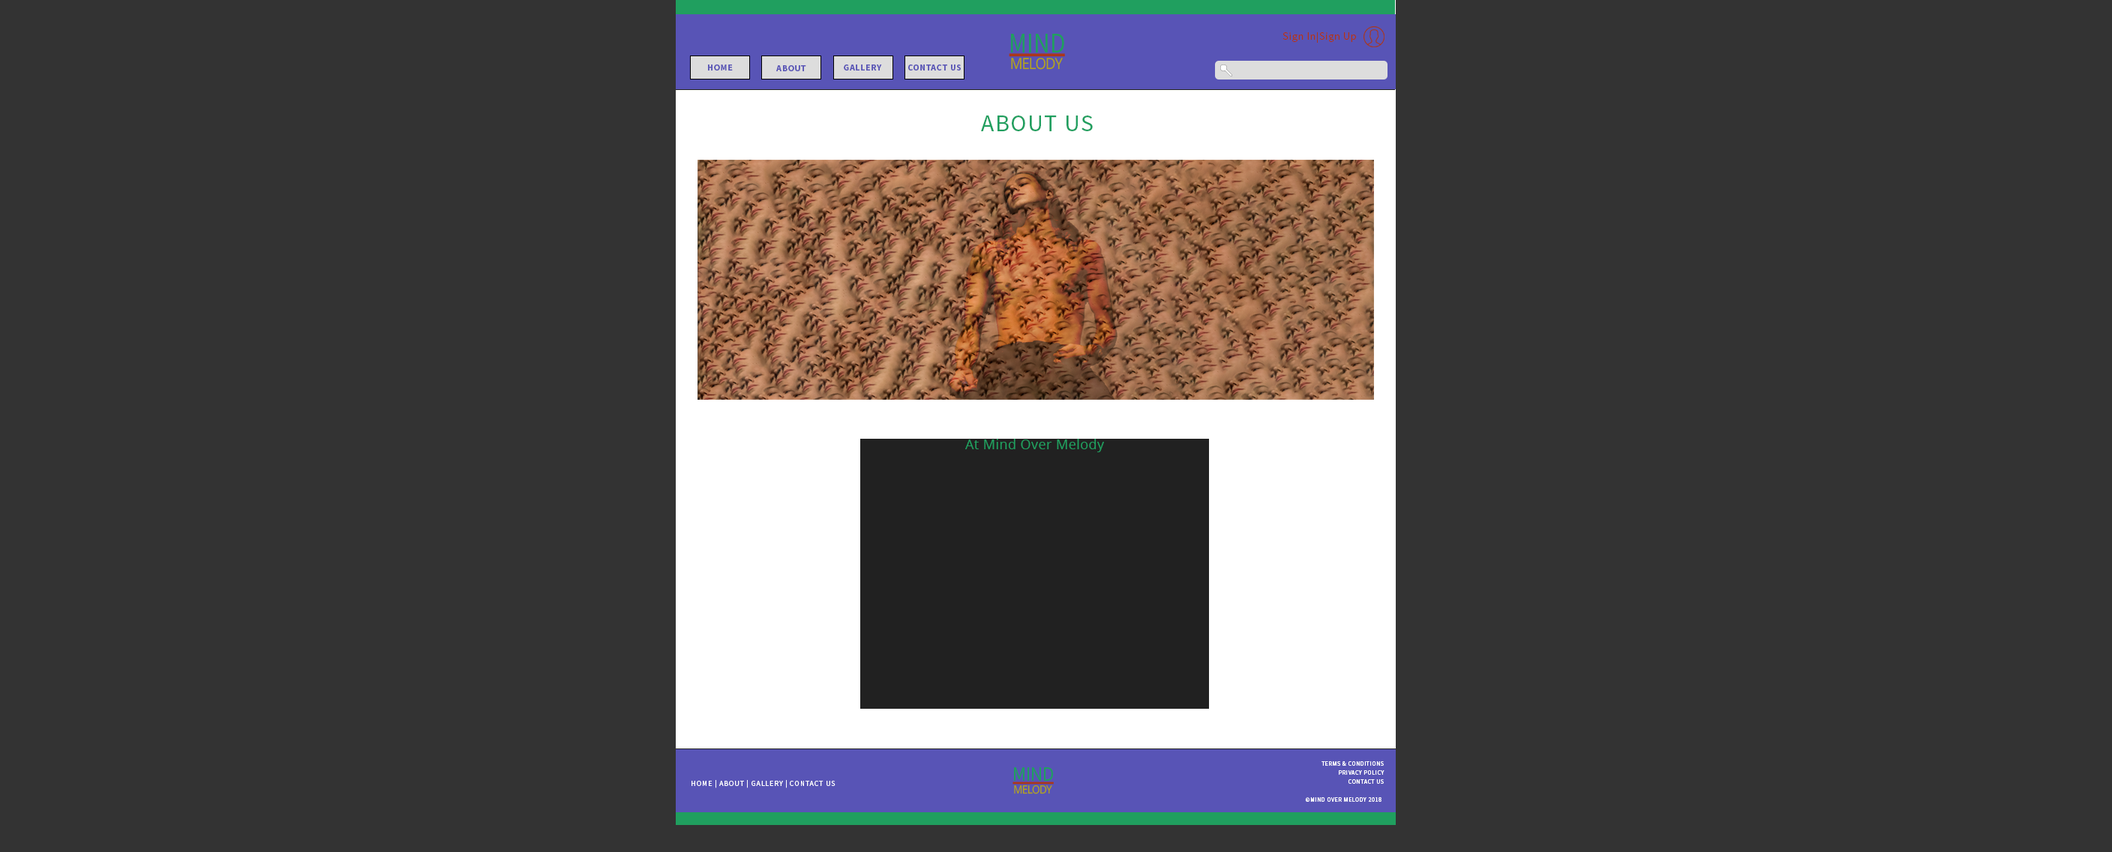
<style>
.page{position:relative;width:2112px;height:852px;background:#333333}
.page>*{position:absolute;margin:0}
.t1{font:10.5px "SourceSansPro-Regular";letter-spacing:0.05em;color:#ac361a}
.t2{font:9px "SourceSansPro-Bold";letter-spacing:0.05em;color:#5854b6}
.t3{font:24px "SourceSansPro-Regular";letter-spacing:0.05em;color:#209f5f}
.t4{font:13.5px "OpenSans";letter-spacing:0.025em;color:#209f5f}
.t5{font:6px/9px "SourceSansPro-Regular";letter-spacing:0.065em;color:#ffffff}
.t6{font:7.5px "SourceSansPro-Regular";letter-spacing:0.08em;color:#ffffff}
</style>
<div class="page">
<p class="t1" style="left:1282px;top:31px;width:74px;height:12px">Sign In|Sign Up</p>
<p class="t2" style="left:708px;top:64px;width:25px;height:6px">HOME</p>
<p class="t2" style="left:776px;top:65px;width:30px;height:6px">ABOUT</p>
<p class="t2" style="left:844px;top:64px;width:38px;height:6px">GALLERY</p>
<p class="t2" style="left:908px;top:64px;width:53px;height:6px">CONTACT US</p>
<p class="t3" style="left:981px;top:115px;width:112px;height:16px">ABOUT US</p>
<p class="t4" style="left:965px;top:439px;width:139px;height:13px">At Mind Over Melody</p>
<p class="t5" style="left:1305px;top:761px;width:79px;height:41px;text-align:right">TERMS &amp; CONDITIONS<br>PRIVACY POLICY<br>CONTACT US<br><br>©MIND OVER MELODY 2018</p>
<p class="t6" style="left:691px;top:780px;width:144px;height:8px">HOME | ABOUT | GALLERY | CONTACT US</p>
</div>
